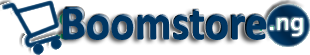
<style>
.page{position:relative;width:310px;height:55px;background:#ffffff}
.page>*{position:absolute;margin:0}
.t1{font:48.1px "Calibri-Bold";color:#003663;scale:0.95 1}
.t2{font:49px "Calibri-Bold";color:#003663;scale:0.91 1}
</style>
<div class="page">
<p class="t1" style="left:63px;top:8px;width:204px;height:32px">Boomstore</p>
<p class="t2" style="left:65px;top:7px;width:200px;height:32px">Boomstore</p>
</div>
